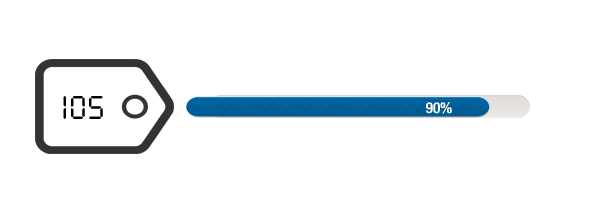
<style>
.page{position:relative;width:600px;height:200px;background:#ffffff}
.page>*{position:absolute;margin:0}
.t1{font:36px "DS-Digital";color:#000000}
.t2{font:15.2px "HelveticaNeue-CondensedBold";color:#ffffff}
</style>
<div class="page">
<p class="t1" style="left:63px;top:96px;width:40px;height:23px">iOS</p>
<p class="t2" style="left:426px;top:102px;width:26px;height:12px">90%</p>
</div>
